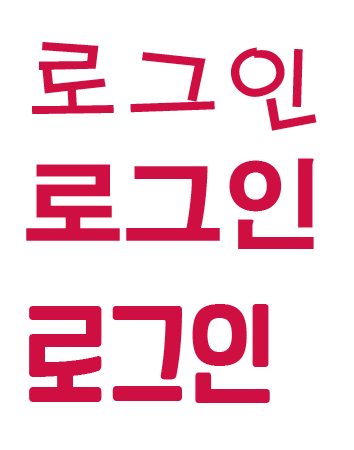
<style>
.page{position:relative;width:354px;height:450px;background:#ffffff}
.page>*{position:absolute;margin:0}
.t1{font:100px "H2porM";color:#cf0f41}
.t2{font:100px "H2gtrE";color:#cf0f41}
.t3{font:100px "YANGJIN";color:#cf0f41}
</style>
<div class="page">
<p class="t1" style="left:32px;top:42px;width:285px;height:89px">로그인</p>
<p class="t2" style="left:26px;top:158px;width:288px;height:91px">로그인</p>
<p class="t3" style="left:29px;top:304px;width:241px;height:99px">로그인</p>
</div>
